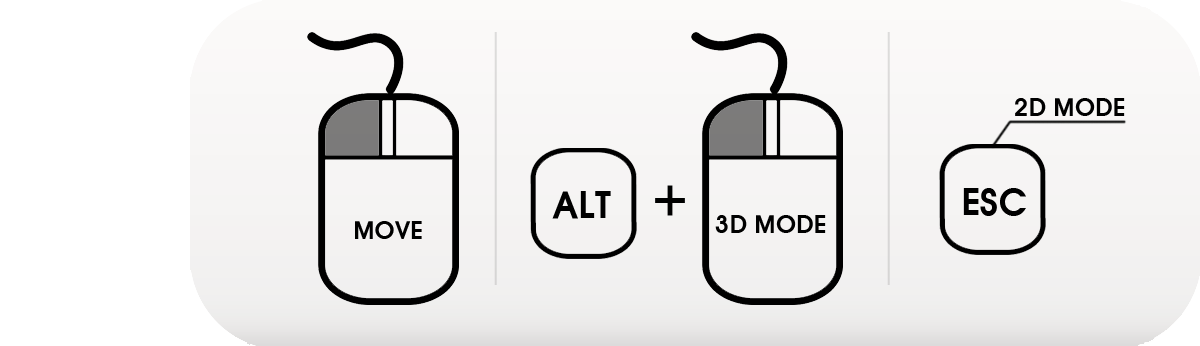
<style>
.page{position:relative;width:1200px;height:346px}
.page>*{position:absolute;margin:0}
.t1{font:24px "HYwulB";letter-spacing:-0.025em;color:#000000;text-transform:uppercase}
.t2{font:36px "HYwulB";letter-spacing:-0.025em;color:#000000;text-transform:uppercase}
</style>
<div class="page">
<p class="t1" style="left:1015px;top:98px;width:110px;height:18px">2D mode</p>
<p class="t2" style="left:963px;top:188px;width:63px;height:28px">ESC</p>
<p class="t1" style="left:355px;top:221px;width:67px;height:18px">Move</p>
</div>
